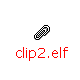
<style>
.page{position:relative;width:80px;height:80px;background:#ffffff}
.page>*{position:absolute;margin:0}
.t1{font:14px "MSReferenceSansSerif";color:#ff0100}
</style>
<div class="page">
<p class="t1" style="left:16px;top:47px;width:52px;height:14px">clip2.elf</p>
</div>
